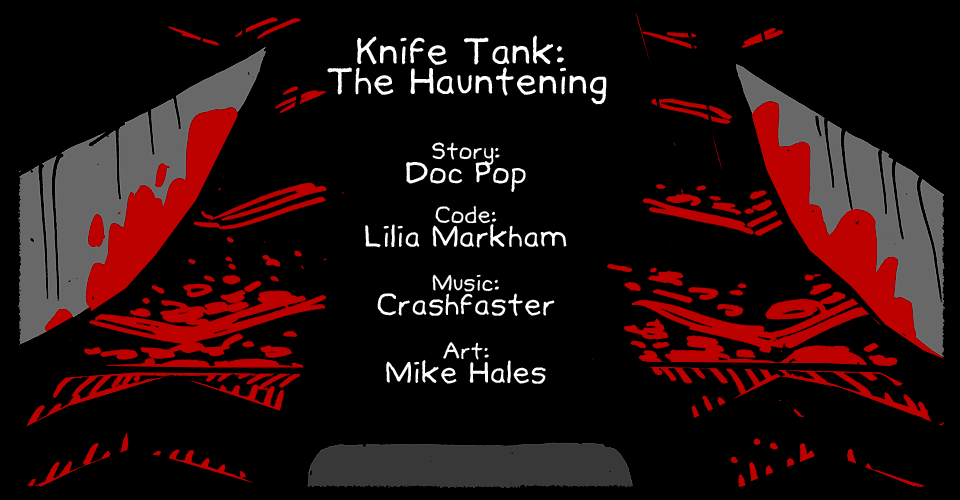
<style>
.page{position:relative;width:960px;height:500px;background:#000000}
.page>*{position:absolute;margin:0}
.t1{font:30px/30px "comicsauce";letter-spacing:0.05em;color:#ffffff}
.t2{font:24px/24px "comicsauce";letter-spacing:0.05em;color:#ffffff}
.t3{font:18px/24px "comicsauce";letter-spacing:0.05em;color:#ffffff}
</style>
<div class="page">
<p class="t1" style="left:327px;top:35px;width:280px;height:70px;text-align:center">Knife Tank: <br>The Hauntening</p>
<p class="t2" style="left:406px;top:142px;width:120px;height:50px;text-align:center"><span class="t3">Story:<br></span>Doc Pop</p>
<p class="t2" style="left:365px;top:206px;width:202px;height:42px;text-align:center"><span class="t3">Code:<br></span>Lilia Markham</p>
<p class="t2" style="left:377px;top:274px;width:178px;height:42px;text-align:center"><span class="t3">Music:<br></span>Crashfaster</p>
<p class="t2" style="left:386px;top:342px;width:160px;height:42px;text-align:center"><span class="t3">Art:<br></span>Mike Hales</p>
</div>
